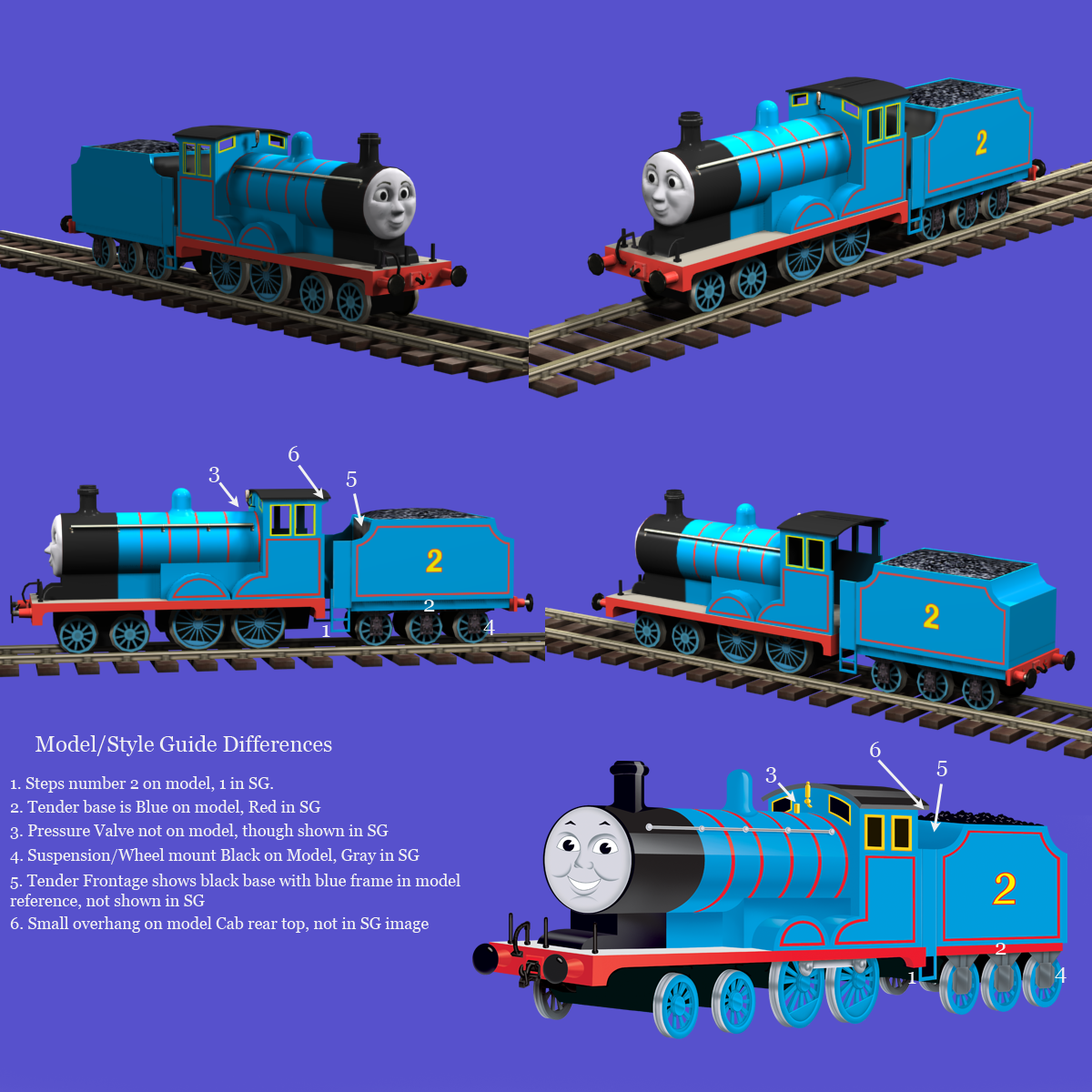
<style>
.page{position:relative;width:1092px;height:1092px;background:#5751cc}
.page>*{position:absolute;margin:0}
.t1{font:21.8px "Georgia";color:#f1f1f1}
.t2{font:16.4px "Georgia";color:#f1f1f1}
</style>
<div class="page">
<p class="t1" style="left:288px;top:446px;width:11px;height:15px">6</p>
<p class="t1" style="left:208px;top:467px;width:11px;height:15px">3</p>
<p class="t1" style="left:346px;top:471px;width:11px;height:16px">5</p>
<p class="t1" style="left:424px;top:600px;width:11px;height:12px">2</p>
<p class="t1" style="left:322px;top:625px;width:8px;height:12px">1</p>
<p class="t1" style="left:483px;top:620px;width:12px;height:15px">4</p>
<p class="t1" style="left:35px;top:735px;width:297px;height:21px">Model/Style Guide Differences</p>
<p class="t1" style="left:870px;top:742px;width:11px;height:15px">6</p>
<p class="t1" style="left:936px;top:761px;width:11px;height:15px">5</p>
<p class="t1" style="left:765px;top:767px;width:11px;height:16px">3</p>
<p class="t2" style="left:11px;top:776px;width:262px;height:17px">1. Steps number 2 on model, 1 in SG.</p>
<p class="t2" style="left:10px;top:800px;width:311px;height:15px">2. Tender base is Blue on model, Red in SG</p>
<p class="t2" style="left:10px;top:824px;width:379px;height:16px">3. Pressure Valve not on model, though shown in SG</p>
<p class="t2" style="left:10px;top:848px;width:410px;height:16px">4. Suspension/Wheel mount Black on Model, Gray in SG</p>
<p class="t2" style="left:10px;top:874px;width:450px;height:35px">5. Tender Frontage shows black base with blue frame in model<br>reference, not shown in SG</p>
<p class="t2" style="left:10px;top:916px;width:419px;height:17px">6. Small overhang on model Cab rear top, not in SG image</p>
<p class="t1" style="left:996px;top:943px;width:10px;height:12px">2</p>
<p class="t1" style="left:908px;top:972px;width:8px;height:12px">1</p>
<p class="t1" style="left:1055px;top:967px;width:12px;height:16px">4</p>
</div>
